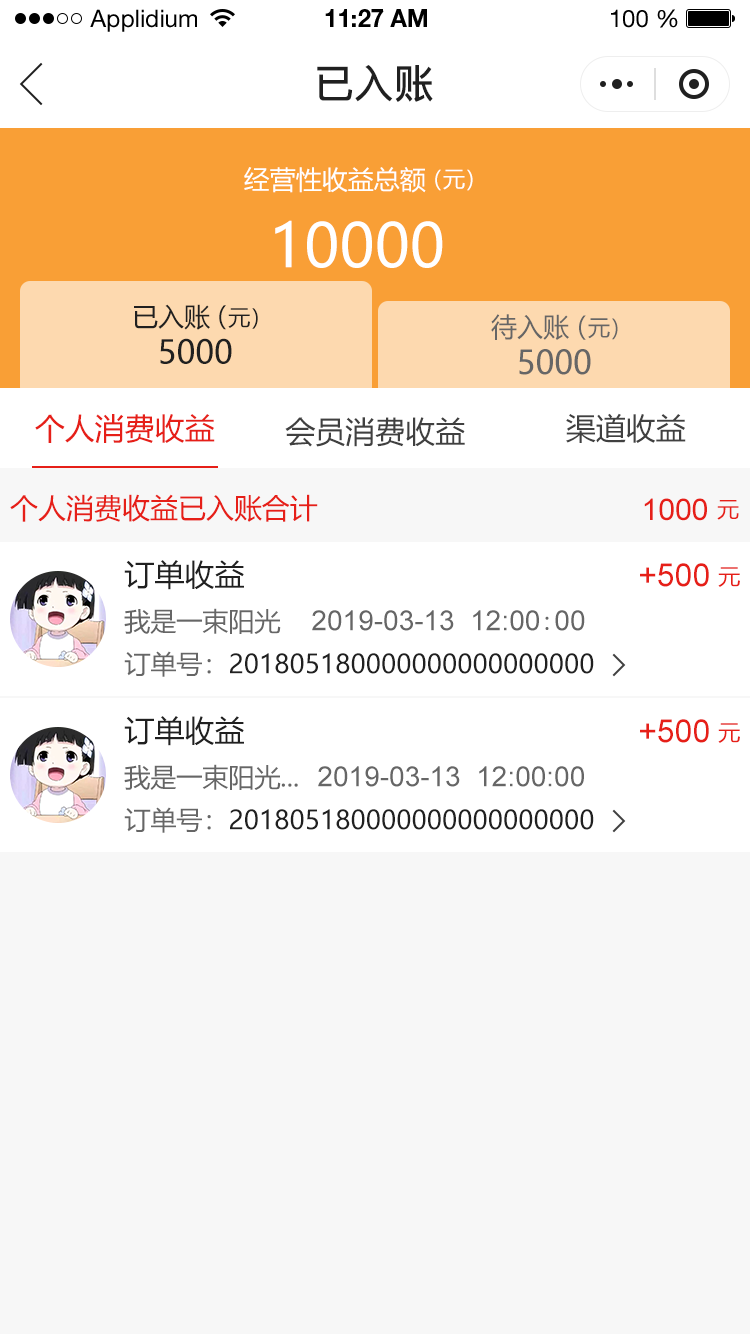
<style>
.page{position:relative;width:750px;height:1334px;background:#f7f7f7}
.page>*{position:absolute;margin:0}
.t1{font:24px "HelveticaNeueLTStd-Roman";color:#000000}
.t2{font:24px "HelveticaNeueLTStd-Bd";color:#000000}
.t3{font:40px "PingFang-SC-Bold";color:#202020;text-transform:uppercase}
.t4{font:26px "MicrosoftYaHei";color:#ffffff;text-transform:uppercase}
.t5{font:22px "MicrosoftYaHei";color:#ffffff;text-transform:uppercase}
.t6{font:60px "MicrosoftYaHei";color:#ffffff;text-transform:uppercase}
.t7{font:26px "MicrosoftYaHei";color:#202020;text-transform:uppercase}
.t8{font:22px "MicrosoftYaHei";color:#202020;text-transform:uppercase}
.t9{font:26.2px "MicrosoftYaHei";color:#666666;text-transform:uppercase}
.t10{font:22.2px "MicrosoftYaHei";color:#666666;text-transform:uppercase}
.t11{font:32px "MicrosoftYaHei";color:#202020;text-transform:uppercase}
.t12{font:32.2px "MicrosoftYaHei";color:#666666;text-transform:uppercase}
.t13{font:30px "MicrosoftYaHei";color:#e61f18;text-transform:uppercase}
.t14{font:30px "MicrosoftYaHei";color:#404040;text-transform:uppercase}
.t15{font:28px "MicrosoftYaHei";color:#e61f18;text-transform:uppercase}
.t16{font:30px "ArialMT";color:#e61f18;text-transform:uppercase}
.t17{font:22px "MicrosoftYaHei";color:#e61f18;text-transform:uppercase}
.t18{font:30px "MicrosoftYaHei";color:#202020;text-transform:uppercase}
.t19{font:32px "ArialMT";color:#e61f18;text-transform:uppercase}
.t20{font:26px "MicrosoftYaHei";color:#666666;text-transform:uppercase}
.t21{font:28px "ArialMT";color:#666666;text-transform:uppercase}
.t22{font:28px "SimSun";color:#666666;text-transform:uppercase}
</style>
<div class="page">
<p class="t1" style="left:90px;top:9px;width:107px;height:23px">Applidium</p>
<p class="t2" style="left:325px;top:9px;width:102px;height:18px">11:27 AM</p>
<p class="t1" style="left:611px;top:9px;width:67px;height:19px">100 %</p>
<p class="t3" style="left:317px;top:65px;width:116px;height:37px">已入账</p>
<p class="t4" style="left:244px;top:167px;width:182px;height:26px">经营性收益总额</p>
<p class="t5" style="left:435px;top:169px;width:38px;height:22px">（元）</p>
<p class="t6" style="left:275px;top:220px;width:168px;height:48px">10000</p>
<p class="t7" style="left:134px;top:304px;width:76px;height:26px">已入账</p>
<p class="t8" style="left:219px;top:305px;width:39px;height:25px"><span class="t7">（</span>元）</p>
<p class="t9" style="left:491px;top:314px;width:78px;height:26px">待入账</p>
<p class="t10" style="left:579px;top:315px;width:39px;height:25px"><span class="t9">（</span>元）</p>
<p class="t11" style="left:160px;top:338px;width:72px;height:26px">5000</p>
<p class="t12" style="left:519px;top:349px;width:72px;height:26px">5000</p>
<p class="t13" style="left:35px;top:414px;width:180px;height:29px">个人消费收益</p>
<p class="t14" style="left:566px;top:413px;width:120px;height:30px">渠道收益</p>
<p class="t14" style="left:285px;top:417px;width:180px;height:30px">会员消费收益</p>
<p class="t15" style="left:10px;top:494px;width:308px;height:28px">个人消费收益已入账合计</p>
<p class="t16" style="left:644px;top:498px;width:63px;height:23px">1000</p>
<p class="t17" style="left:717px;top:500px;width:22px;height:20px">元</p>
<p class="t18" style="left:124px;top:560px;width:120px;height:30px">订单收益</p>
<p class="t19" style="left:640px;top:563px;width:69px;height:24px">+500</p>
<p class="t17" style="left:718px;top:567px;width:22px;height:20px">元</p>
<p class="t20" style="left:124px;top:608px;width:157px;height:26px">我是一束阳光</p>
<p class="t21" style="left:312px;top:610px;width:273px;height:21px">2019-03-13  12:00<span class="t22">:</span>00</p>
<p class="t7" style="left:124px;top:651px;width:470px;height:26px"><span class="t20">订单号：</span>201805180000000000000000</p>
<p class="t18" style="left:124px;top:716px;width:120px;height:30px">订单收益</p>
<p class="t19" style="left:640px;top:719px;width:69px;height:24px">+500</p>
<p class="t17" style="left:718px;top:723px;width:22px;height:20px">元</p>
<p class="t20" style="left:124px;top:764px;width:174px;height:26px">我是一束阳光...</p>
<p class="t21" style="left:318px;top:766px;width:266px;height:21px">2019-03-13  12:00:00</p>
<p class="t7" style="left:124px;top:807px;width:470px;height:26px"><span class="t20">订单号：</span>201805180000000000000000</p>
</div>
